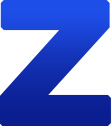
<style>
.page{position:relative;width:112px;height:126px;background:#ffffff}
.page>*{position:absolute;margin:0}
.t1{font:170.3px "AvenirNext-Bold";text-transform:uppercase;font-weight:bold;scale:1.11 1}
</style>
<div class="page">
<p class="t1" style="left:0px;top:0px;width:111px;height:127px">Z</p>
</div>
